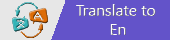
<style>
.page{position:relative;width:170px;height:40px;background:#6353c9}
.page>*{position:absolute;margin:0}
.t1{font:16px "SegoeUI";letter-spacing:-0.01em;color:#fefefe}
</style>
<div class="page">
<p class="t1" style="left:76px;top:4px;width:80px;height:31px;text-align:center">Translate to <br>En</p>
</div>
